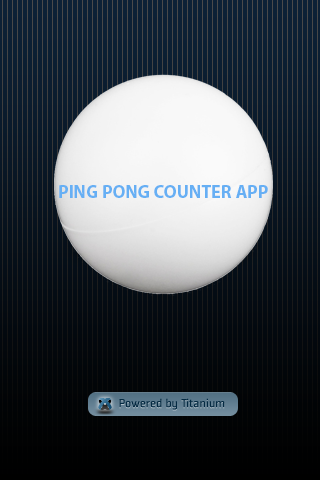
<style>
.page{position:relative;width:320px;height:480px}
.page>*{position:absolute;margin:0}
.t1{font:18px "MyriadPro-Bold";color:#66aff4}
</style>
<div class="page">
<p class="t1" style="left:59px;top:185px;width:209px;height:13px">PING PONG COUNTER APP</p>
</div>
